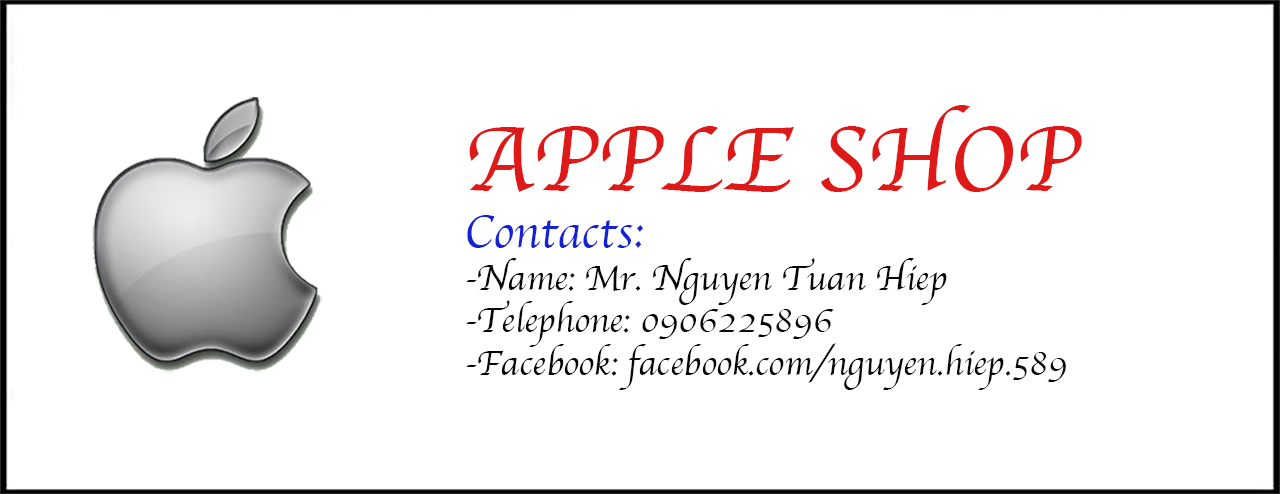
<style>
.page{position:relative;width:1280px;height:494px;background:#ffffff}
.page>*{position:absolute;margin:0}
.t1{font:35.6px "Apple-Chancery";color:#070707}
.t2{font:94.8px "Apple-Chancery";color:#df1818}
.t3{font:47.4px "Apple-Chancery";color:#1422d4}
</style>
<div class="page">
<p class="t1" style="left:466px;top:105px;width:616px;height:285px"><span class="t2">APPLE SHOP<br></span><span class="t3">Contacts:<br></span>-Name: Mr. Nguyen Tuan Hiep<br>-Telephone: 0906225896<br>-Facebook: facebook.com/nguyen.hiep.589</p>
</div>
